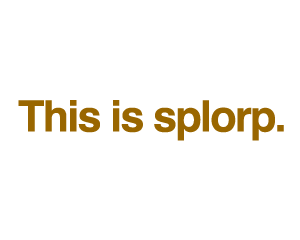
<style>
.page{position:relative;width:300px;height:240px;background:#ffffff}
.page>*{position:absolute;margin:0}
.t1{font:43.2px "Helvetica-Bold";letter-spacing:-0.04em;color:#996600}
</style>
<div class="page">
<p class="t1" style="left:18px;top:100px;width:266px;height:41px">This is splorp.</p>
</div>
